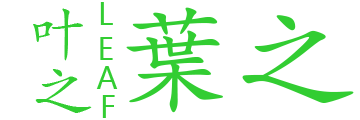
<style>
.page{position:relative;width:360px;height:120px;background:#ffffff}
.page>*{position:absolute;margin:0}
.t1{font:30px "MicrosoftYaHei";color:#32cd32}
.t2{font:60px "STKaiti";color:#32cd32}
.t3{font:120px "STKaiti";color:#32cd32}
</style>
<div class="page">
<p class="t1" style="left:100px;top:2px;width:13px;height:23px">L</p>
<p class="t2" style="left:33px;top:8px;width:50px;height:53px">叶</p>
<p class="t3" style="left:126px;top:7px;width:228px;height:106px">葉之</p>
<p class="t1" style="left:100px;top:37px;width:13px;height:23px">E</p>
<p class="t2" style="left:35px;top:69px;width:57px;height:44px">之</p>
<p class="t1" style="left:96px;top:66px;width:22px;height:23px">A</p>
<p class="t1" style="left:102px;top:95px;width:13px;height:23px">F</p>
</div>
